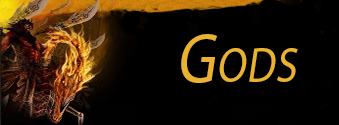
<style>
.page{position:relative;width:339px;height:125px;background:#000000}
.page>*{position:absolute;margin:0}
.t1{font:70px "MyriadPro-Regular";letter-spacing:0.025em;color:#e9b230;font-variant:small-caps;font-style:italic;scale:0.86 1}
</style>
<div class="page">
<p class="t1" style="left:181px;top:34px;width:117px;height:49px">Gods</p>
</div>
